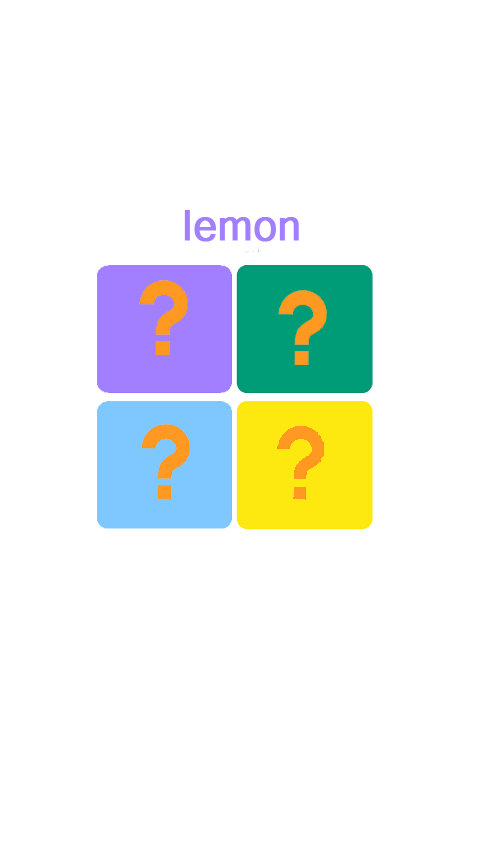
<style>
.page{position:relative;width:480px;height:854px;background:#ffffff}
.page>*{position:absolute;margin:0}
.t1{font:41.7px "MicrosoftSansSerif";color:#a17fff;font-weight:bold}
</style>
<div class="page">
<p class="t1" style="left:184px;top:210px;width:115px;height:32px">lemon</p>
</div>
